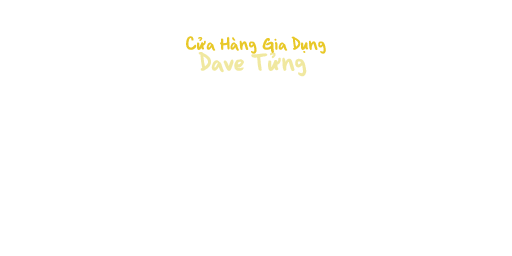
<style>
.page{position:relative;width:512px;height:256px;background:#ffffff}
.page>*{position:absolute;margin:0}
.t1{font:18.7px "BrianneTod";color:#e8c828}
.t2{font:26.7px "BrianneTod";color:#f0e8a0}
</style>
<div class="page">
<p class="t1" style="left:186px;top:36px;width:140px;height:18px">Cửa Hàng Gia Dụng</p>
<p class="t2" style="left:198px;top:52px;width:109px;height:25px">Dave Tửng</p>
</div>
